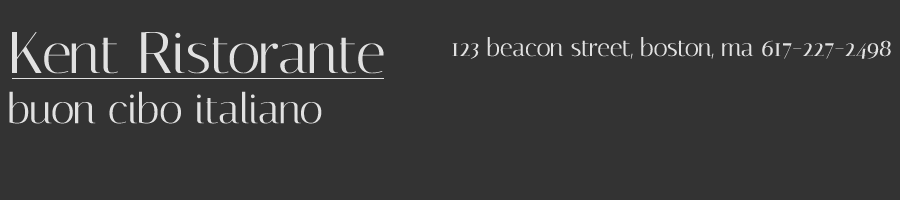
<style>
.page{position:relative;width:900px;height:200px;background:#333333}
.page>*{position:absolute;margin:0}
.t1{font:41.8px "Italiana-Regular";color:#e1e1e1}
.t2{font:58.5px "Italiana-Regular";color:#e1e1e1}
.t3{font:50.2px "Italiana-Regular";color:#e1e1e1}
.t4{font:33.4px "Italiana-Regular";color:#e1e1e1}
.t5{font:25.1px "Italiana-Regular";color:#e1e1e1}
</style>
<div class="page">
<p class="t1" style="left:9px;top:32px;width:375px;height:92px"><span class="t2">Kent Ristorante<br></span>buon cibo italiano<br><span class="t3"><br></span><br><span class="t4"></span></p>
<p class="t5" style="left:452px;top:37px;width:439px;height:22px">123 beacon street, boston, ma 617-227-2498</p>
</div>
